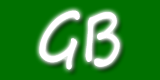
<style>
.page{position:relative;width:160px;height:80px;background:#007100}
.page>*{position:absolute;margin:0}
.t1{font:69.7px "SegoeScript";color:#ffffff;scale:0.78 1}
</style>
<div class="page">
<p class="t1" style="left:39px;top:10px;width:81px;height:60px">GB</p>
</div>
